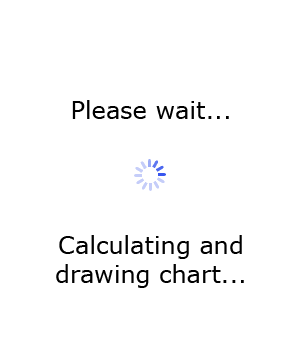
<style>
.page{position:relative;width:300px;height:350px;background:#ffffff}
.page>*{position:absolute;margin:0}
.t1{font:24px "Verdana";color:#000000}
</style>
<div class="page">
<p class="t1" style="left:70px;top:98px;width:162px;height:28px">Please wait...</p>
<p class="t1" style="left:36px;top:234px;width:230px;height:101px;text-align:center">Calculating and drawing chart...</p>
</div>
